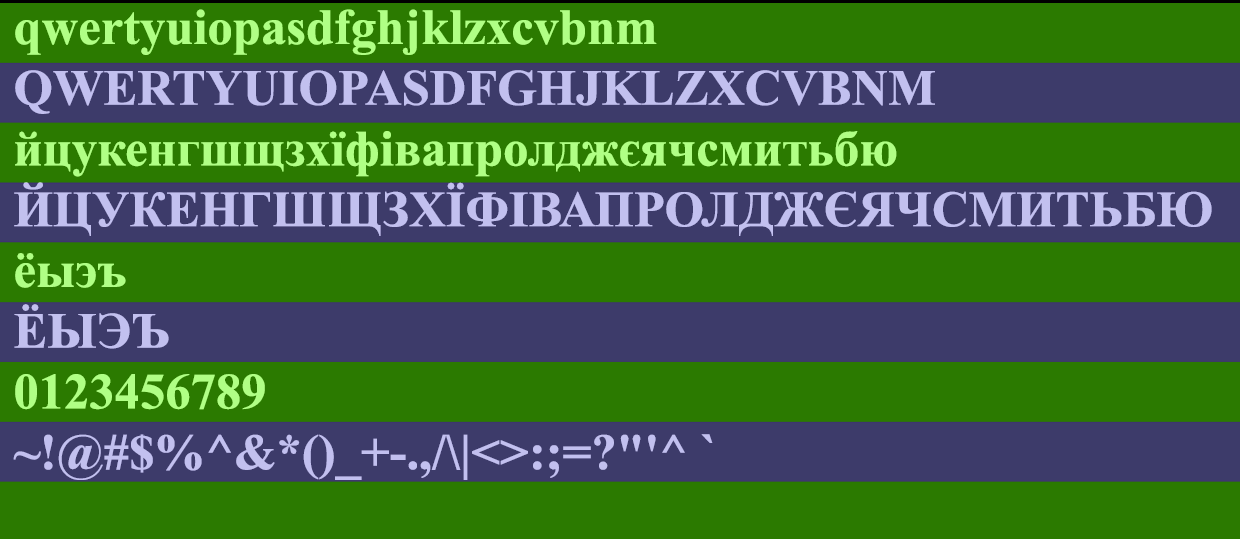
<style>
.page{position:relative;width:1240px;height:539px;background:#2b7a00}
.page>*{position:absolute;margin:0}
.t1{font:50.6px "TimesNewRomanPS-BoldMT"}
</style>
<div class="page">
<p class="t1" style="left:13px;top:9px;width:1199px;height:471px">qwertyuiopasdfghjklzxcvbnm<br>QWERTYUIOPASDFGHJKLZXCVBNM<br>йцукенгшщзхїфівапролджєячсмитьбю<br>ЙЦУКЕНГШЩЗХЇФІВАПРОЛДЖЄЯЧСМИТЬБЮ<br>ёыэъ<br>ЁЫЭЪ<br>0123456789<br>~!@#$%^&amp;*()_+-.,/\|&lt;&gt;:;=?"'^ `</p>
</div>
